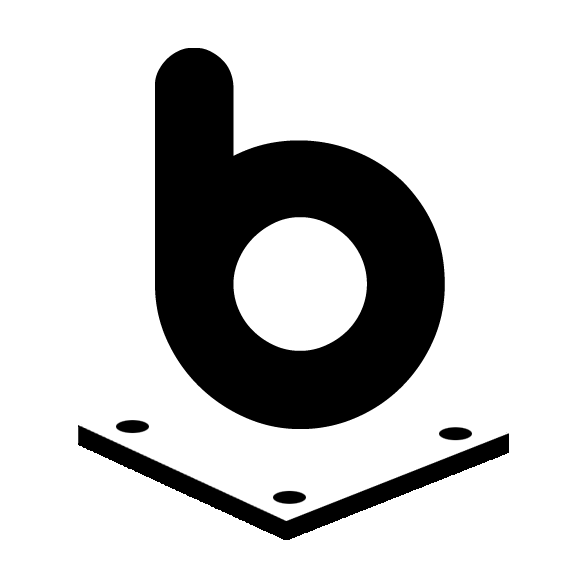
<style>
.page{position:relative;width:587px;height:587px;background:#ffffff}
.page>*{position:absolute;margin:0}
.t1{font:596.8px "zArista";letter-spacing:0.19em;color:#010000}
</style>
<div class="page">
<p class="t1" style="left:155px;top:48px;width:290px;height:381px">b</p>
</div>
